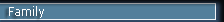
<style>
.page{position:relative;width:224px;height:22px;background:#527f9b}
.page>*{position:absolute;margin:0}
.t1{font:12.1px "Verdana";color:#ffffff;scale:0.91 1}
</style>
<div class="page">
<p class="t1" style="left:9px;top:6px;width:35px;height:12px">Family</p>
</div>
